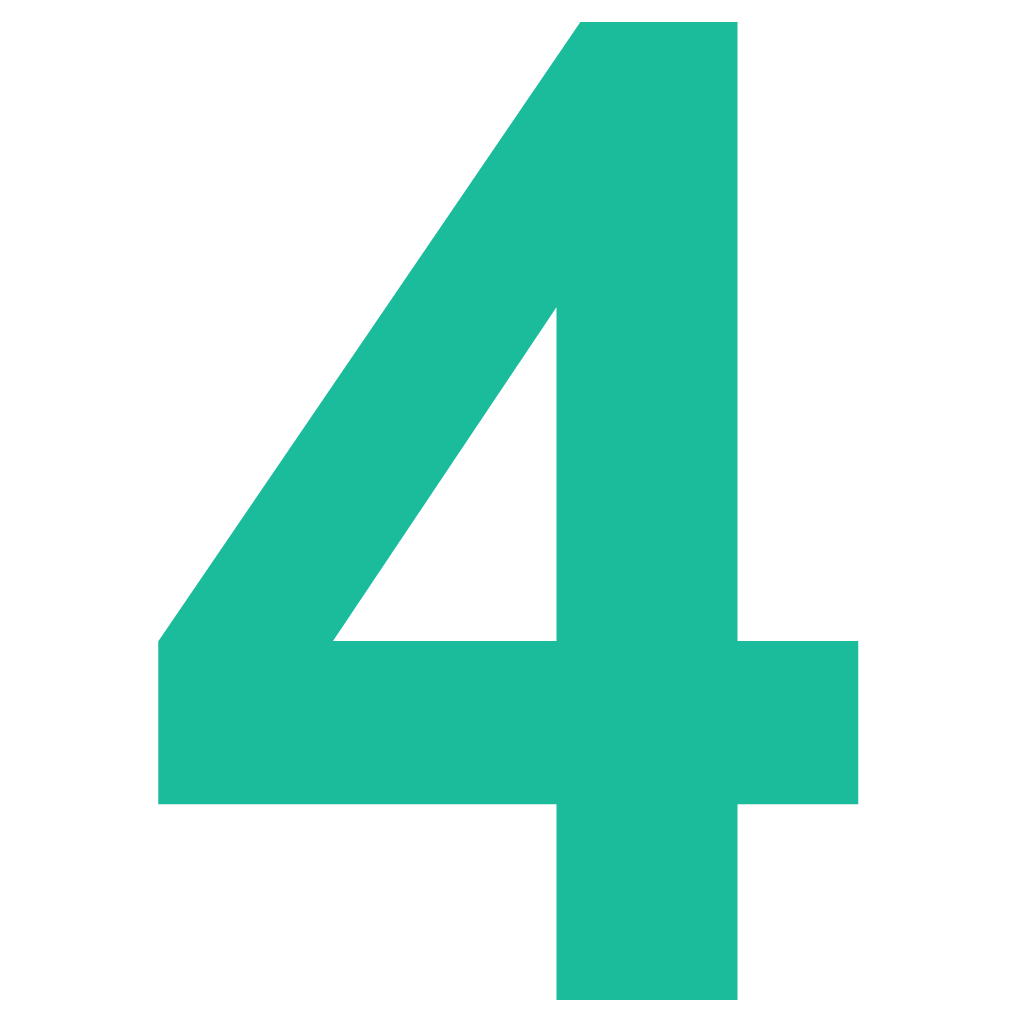
<style>
.page{position:relative;width:1024px;height:1024px;background:#ffffff}
.page>*{position:absolute;margin:0}
.t1{font:1360px "Arial-BoldMT";color:#1abc9c}
</style>
<div class="page">
<p class="t1" style="left:158px;top:22px;width:701px;height:978px">4</p>
</div>
